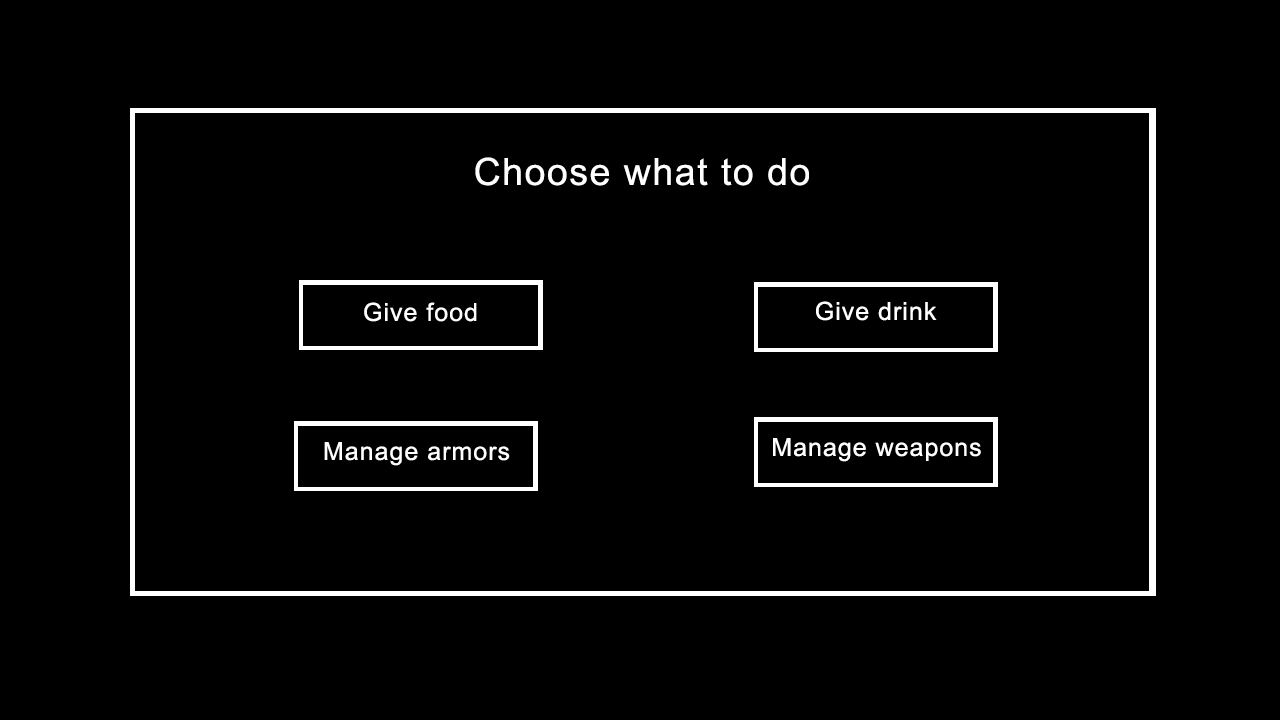
<style>
.page{position:relative;width:1280px;height:720px;background:#000000}
.page>*{position:absolute;margin:0}
.t1{font:37.5px "ArialMT";letter-spacing:0.04em;color:#ffffff}
.t2{font:25px "ArialMT";letter-spacing:0.04em;color:#ffffff}
</style>
<div class="page">
<p class="t1" style="left:475px;top:157px;width:334px;height:29px">Choose what to do</p>
<p class="t2" style="left:364px;top:302px;width:113px;height:20px">Give food</p>
<p class="t2" style="left:816px;top:301px;width:121px;height:20px">Give drink</p>
<p class="t2" style="left:773px;top:438px;width:208px;height:24px">Manage weapons</p>
<p class="t2" style="left:324px;top:442px;width:186px;height:24px">Manage armors</p>
</div>
